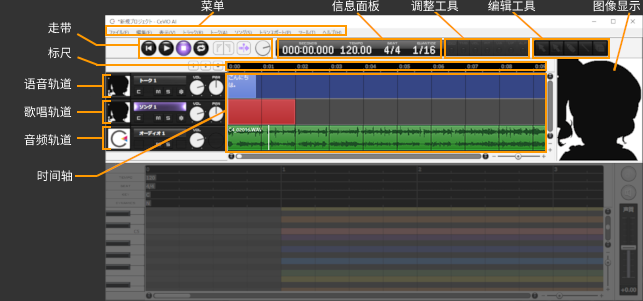
<style>
.page{position:relative;width:643px;height:301px}
.page>*{position:absolute;margin:0}
.t1{font:12px "Sarasa-Gothic-SC-Regular";color:#ffffff}
</style>
<div class="page">
<p class="t1" style="left:201px;top:0px;width:23px;height:12px">菜单</p>
<p class="t1" style="left:332px;top:0px;width:48px;height:12px">信息面板</p>
<p class="t1" style="left:411px;top:0px;width:48px;height:12px">调整工具</p>
<p class="t1" style="left:488px;top:0px;width:48px;height:12px">编辑工具</p>
<p class="t1" style="left:593px;top:0px;width:47px;height:12px">图像显示</p>
<p class="t1" style="left:48px;top:22px;width:23px;height:12px">走带</p>
<p class="t1" style="left:48px;top:47px;width:24px;height:12px">标尺</p>
<p class="t1" style="left:24px;top:78px;width:48px;height:12px">语音轨道</p>
<p class="t1" style="left:24px;top:106px;width:48px;height:12px">歌唱轨道</p>
<p class="t1" style="left:24px;top:134px;width:48px;height:12px">音频轨道</p>
<p class="t1" style="left:37px;top:170px;width:35px;height:12px">时间轴</p>
</div>
